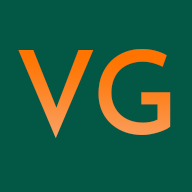
<style>
.page{position:relative;width:192px;height:192px;background:#035845}
.page>*{position:absolute;margin:0}
.t1{font:115.7px "JosefinSans-Medium"}
</style>
<div class="page">
<p class="t1" style="left:18px;top:49px;width:153px;height:89px">VG</p>
</div>
